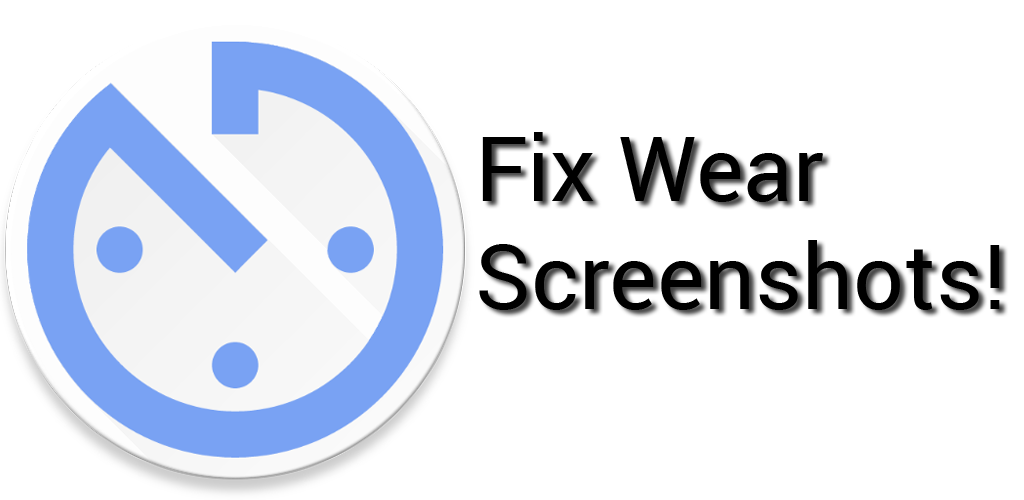
<style>
.page{position:relative;width:1024px;height:500px;background:#ffffff}
.page>*{position:absolute;margin:0}
.t1{font:90px "Roboto-Regular";color:#000000}
</style>
<div class="page">
<p class="t1" style="left:479px;top:132px;width:521px;height:178px">Fix Wear<br>Screenshots!</p>
</div>
